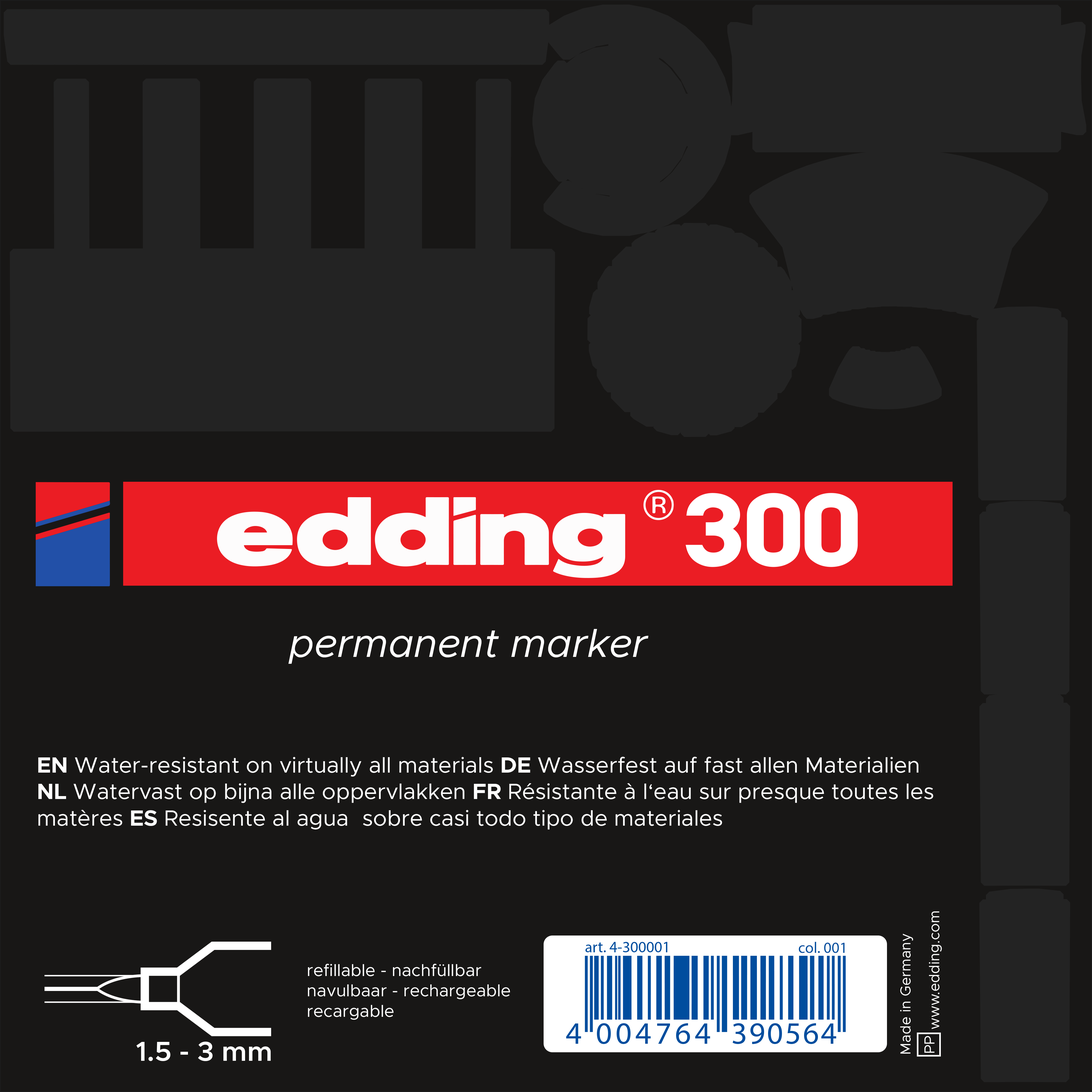
<style>
.page{position:relative;width:1092px;height:1092px;background:#181716}
.page>*{position:absolute;margin:0}
.t1{font:40px "Metropolis-RegularItalic";color:#ffffff}
.t2{font:22.1px "Metropolis-Regular";color:#ffffff}
.t3{font:22.1px "Metropolis-Bold";color:#ffffff}
.t4{font:14.5px "Metropolis-Regular";color:#ffffff}
.t5{font:15.5px "MyriadPro-Regular";color:#004d9e}
.t6{font:17px "Metropolis-Regular";color:#ffffff}
</style>
<div class="page">
<p class="t1" style="left:288px;top:629px;width:360px;height:35px">permanent marker</p>
<p class="t2" style="left:38px;top:757px;width:895px;height:73px;text-align:justify"><span class="t3">EN </span>Water-resistant on virtually all materials <span class="t3">DE </span>Wasserfest auf fast allen Materialien<br><span class="t3">NL </span>Watervast op bijna alle oppervlakken <span class="t3">FR </span>Résistante à l‘eau sur presque toutes les<br>matères <span class="t3">ES </span>Resisente al agua  sobre casi todo tipo de materiales</p>
<p class="t4" style="left:929px;top:911px;width:13px;height:118px;rotate:-90deg">www.edding.com</p>
<p class="t5" style="left:799px;top:942px;width:46px;height:11px">col. 001</p>
<p class="t4" style="left:900px;top:934px;width:13px;height:120px;rotate:-90deg">Made in Germany</p>
<p class="t6" style="left:308px;top:964px;width:202px;height:56px;text-align:justify">refillable - nachfüllbar<br>navulbaar - rechargeable<br>recargable</p>
<p class="t4" style="left:924px;top:1036px;width:10px;height:17px;rotate:-90deg">PP</p>
</div>
